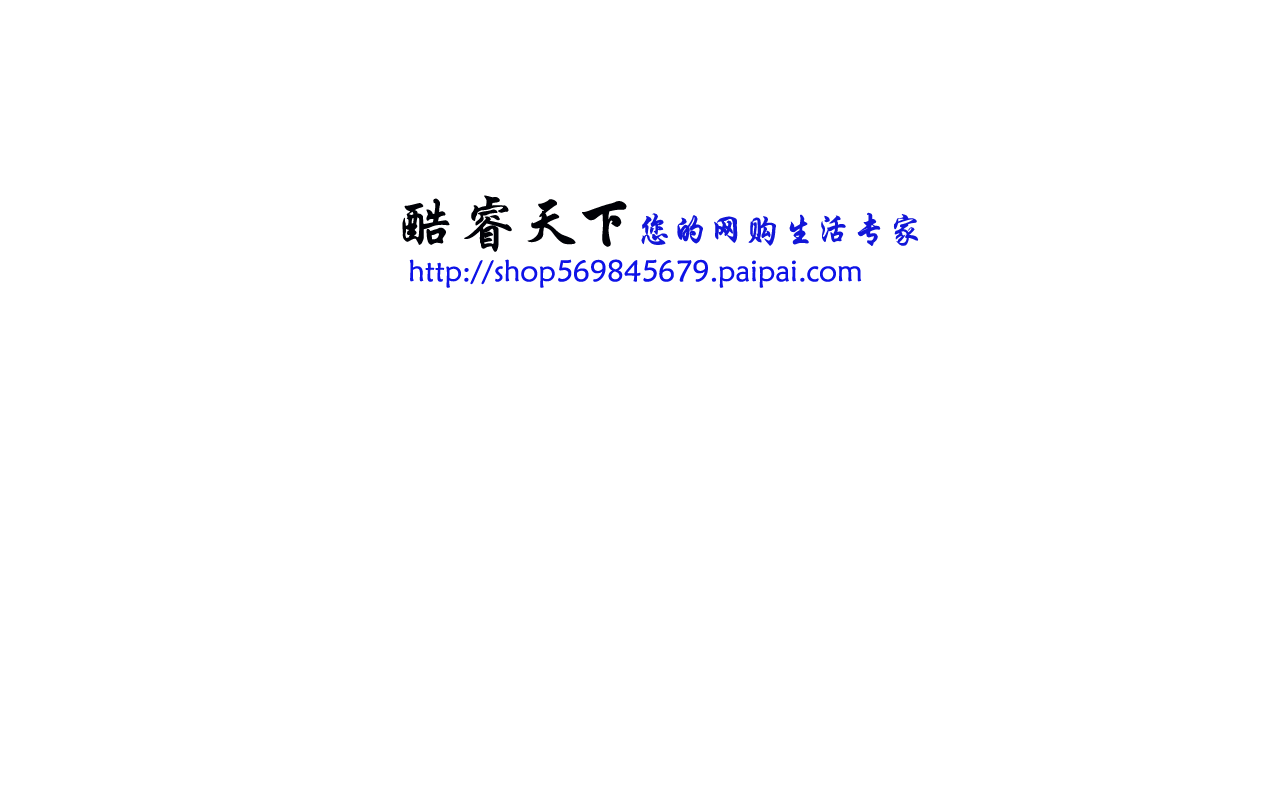
<style>
.page{position:relative;width:1280px;height:800px;background:#ffffff}
.page>*{position:absolute;margin:0}
.t1{font:36px "STXingkai";color:#1216d8}
.t2{font:60px "STXingkai";color:#000106}
.t3{font:30px "STXinwei";color:#0e13e7}
</style>
<div class="page">
<p class="t1" style="left:402px;top:195px;width:517px;height:57px"><span class="t2">酷睿天下</span>您的网购生活专家</p>
<p class="t3" style="left:409px;top:259px;width:453px;height:29px">http://shop569845679.paipai.com</p>
</div>
